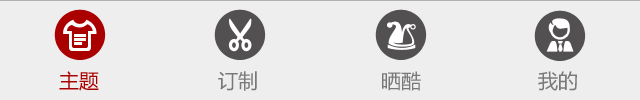
<style>
.page{position:relative;width:640px;height:100px;background:#eeeeee}
.page>*{position:absolute;margin:0}
.t1{font:20px "MicrosoftYaHei";color:#ab0000}
.t2{font:20px "MicrosoftYaHei";color:#7a7878}
</style>
<div class="page">
<p class="t1" style="left:59px;top:71px;width:40px;height:20px">主题</p>
<p class="t2" style="left:218px;top:71px;width:39px;height:20px">订制</p>
<p class="t2" style="left:382px;top:71px;width:39px;height:20px">晒酷</p>
<p class="t2" style="left:538px;top:71px;width:39px;height:20px">我的</p>
</div>
